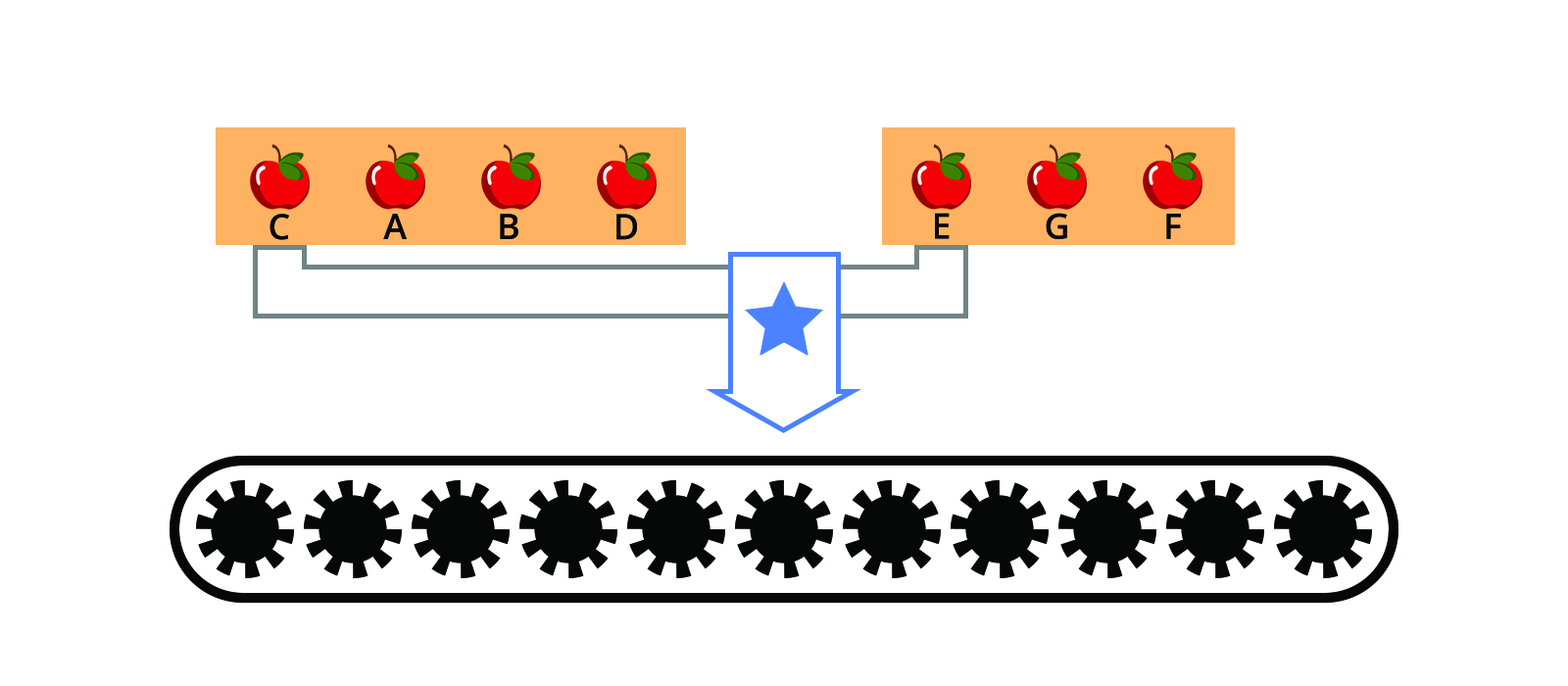
<style>
.page{position:relative;width:1568px;height:686px;background:#ffffff}
.page>*{position:absolute;margin:0}
.t1{font:35.3px "OpenSans-SemiBold";letter-spacing:0.12em;color:#060808}
</style>
<div class="page">
<p class="t1" style="left:270px;top:214px;width:19px;height:26px">C</p>
<p class="t1" style="left:383px;top:214px;width:24px;height:25px">A</p>
<p class="t1" style="left:500px;top:214px;width:18px;height:25px">B</p>
<p class="t1" style="left:616px;top:214px;width:21px;height:26px">D</p>
<p class="t1" style="left:935px;top:213px;width:15px;height:26px">E</p>
<p class="t1" style="left:1046px;top:213px;width:21px;height:26px">G</p>
<p class="t1" style="left:1166px;top:214px;width:15px;height:25px">F</p>
</div>
